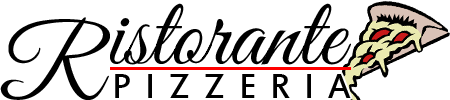
<style>
.page{position:relative;width:450px;height:100px;background:#ffffff}
.page>*{position:absolute;margin:0}
.t1{font:100px "GreatVibes-Regular";color:#000000}
.t2{font:100px "GreatVibes-Regular";letter-spacing:0.06em;color:#000000}
.t3{font:38px "EstrangeloEdessa";letter-spacing:0.36em;color:#000000}
</style>
<div class="page">
<p class="t1" style="left:0px;top:3px;width:351px;height:97px"><span class="t2">R</span>istorante</p>
<p class="t3" style="left:115px;top:74px;width:236px;height:24px">PIZZERIA</p>
</div>
